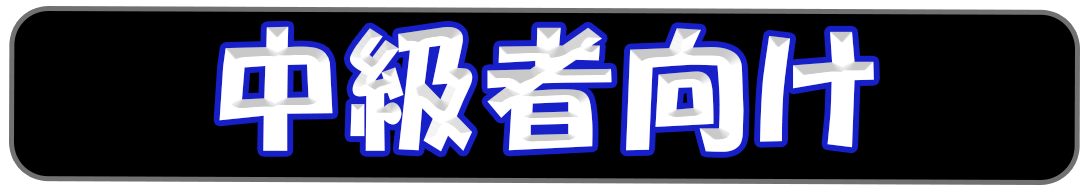
<style>
.page{position:relative;width:1089px;height:192px;background:#000000}
.page>*{position:absolute;margin:0}
.t1{font:130.2px "HGPSoeiKakupoptai";letter-spacing:0.05em;color:#ffffff}
</style>
<div class="page">
<p class="t1" style="left:219px;top:26px;width:655px;height:126px">中級者向け</p>
</div>
